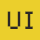
<style>
.page{position:relative;width:40px;height:40px;background:#ebcf2c}
.page>*{position:absolute;margin:0}
.t1{font:20px "Dogica_Pixel";color:#2c2825}
</style>
<div class="page">
<p class="t1" style="left:7px;top:11px;width:26px;height:18px">UI</p>
</div>
